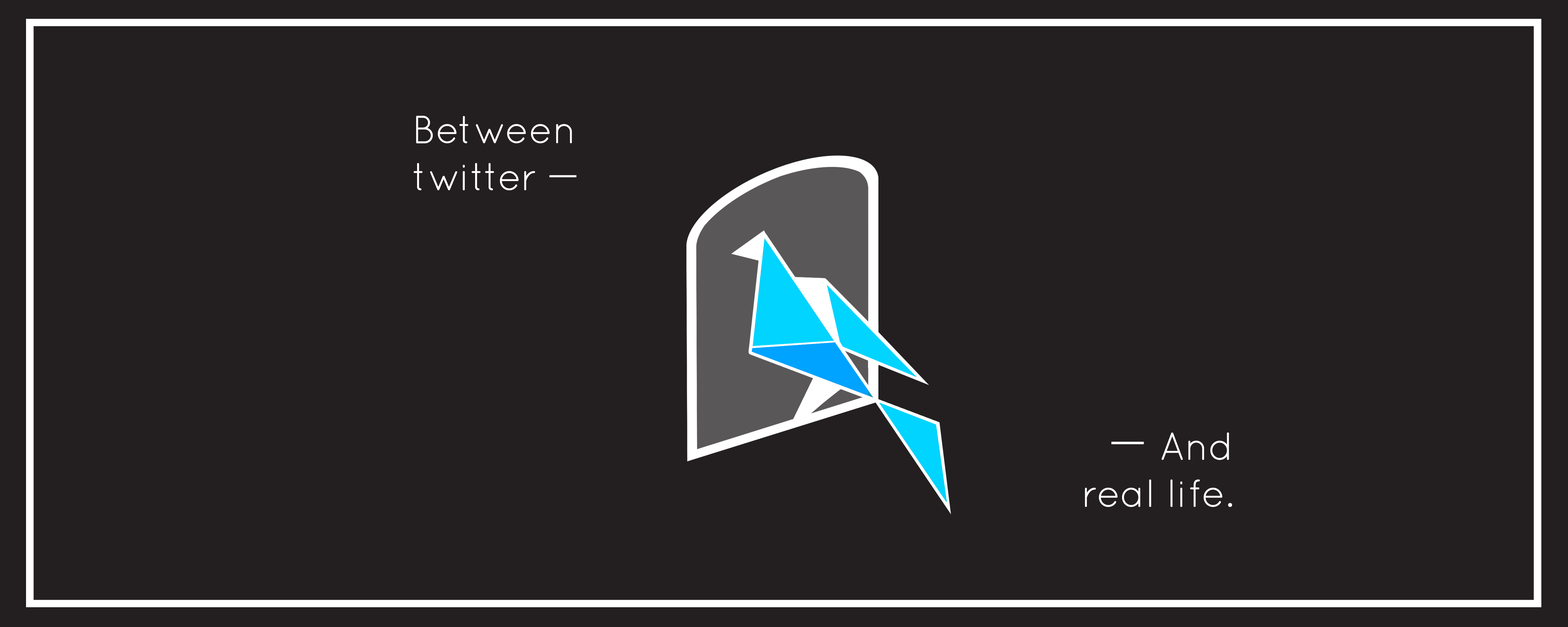
<style>
.page{position:relative;width:1568px;height:627px;background:#231f20}
.page>*{position:absolute;margin:0}
.t1{font:39.2px "QuicksandBook-Regular";color:#ffffff}
.t2{font:39.2px "Gulim";color:#ffffff}
.t3{font:47px "Gulim";color:#ffffff}
</style>
<div class="page">
<p class="t1" style="left:414px;top:116px;width:162px;height:74px">Between<br>twitter <span class="t2">―</span></p>
<p class="t1" style="left:1085px;top:432px;width:147px;height:75px;text-align:right"><span class="t3">― </span>And<br>real life.</p>
</div>
